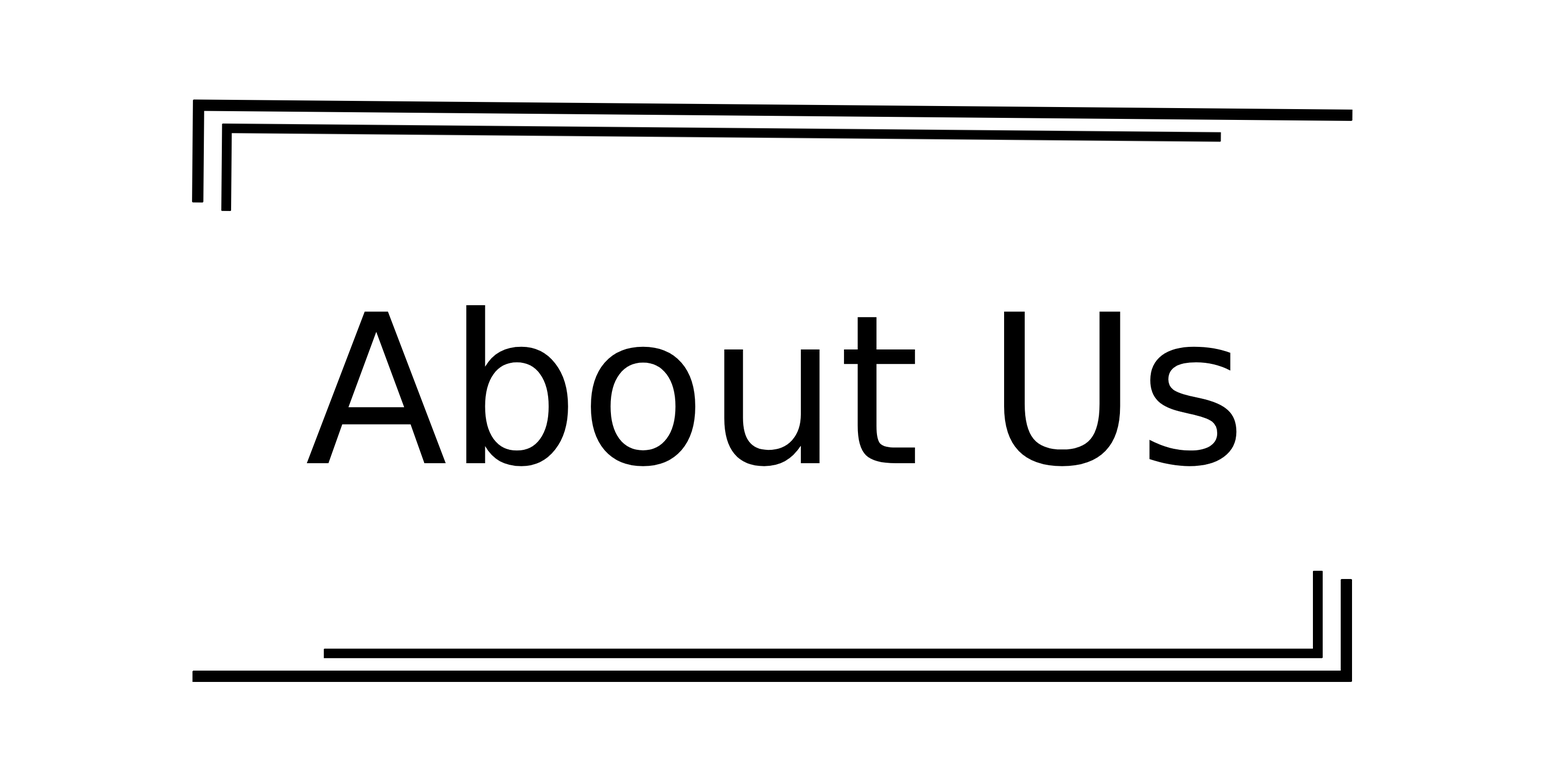
<style>
.page{position:relative;width:1544px;height:772px;background:#ffffff}
.page>*{position:absolute;margin:0}
.t1{font:208px "Altone-Regular";color:#000000}
</style>
<div class="page">
<p class="t1" style="left:307px;top:305px;width:930px;height:161px">About Us</p>
</div>
